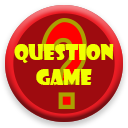
<style>
.page{position:relative;width:128px;height:128px;background:#9e0b0f}
.page>*{position:absolute;margin:0}
.t1{font:20.8px "ShowcardGothic-Reg";color:#f0ff00}
</style>
<div class="page">
<p class="t1" style="left:14px;top:44px;width:100px;height:42px;text-align:center">Question Game</p>
</div>
